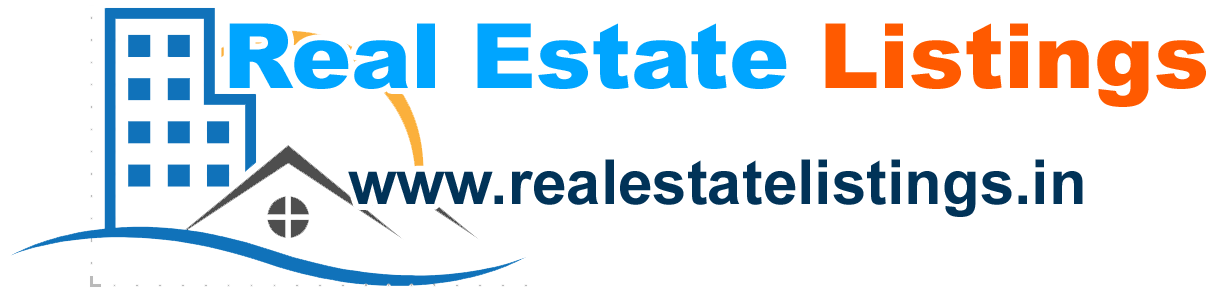
<style>
.page{position:relative;width:1232px;height:293px;background:#ffffff}
.page>*{position:absolute;margin:0}
.t1{font:90px "Arial-Black";color:#00a5ff}
.t2{font:90px "Arial-Black";color:#ff5a00}
.t3{font:62px "Arial-BoldMT";color:#013358}
</style>
<div class="page">
<p class="t1" style="left:229px;top:23px;width:977px;height:84px">Real Estate <span class="t2">Listings</span></p>
<p class="t3" style="left:348px;top:159px;width:735px;height:58px">www.realestatelistings.in</p>
</div>
